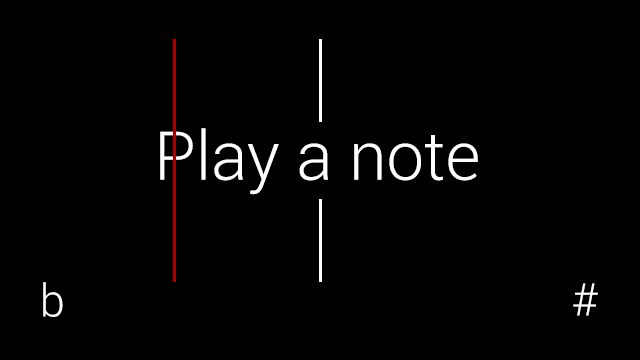
<style>
.page{position:relative;width:640px;height:360px;background:#000000}
.page>*{position:absolute;margin:0}
.t1{font:67.5px "Roboto-Light";color:#ffffff}
.t2{font:45px "Roboto-Light";color:#ffffff}
</style>
<div class="page">
<p class="t1" style="left:160px;top:128px;width:318px;height:67px">Play a note</p>
<p class="t2" style="left:43px;top:282px;width:20px;height:35px">b</p>
<p class="t2" style="left:573px;top:283px;width:25px;height:33px">#</p>
</div>
